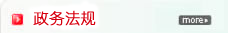
<style>
.page{position:relative;width:228px;height:33px}
.page>*{position:absolute;margin:0}
.t1{font:15.3px "YouYuan";color:#d7000f;font-weight:bold}
</style>
<div class="page">
<p class="t1" style="left:33px;top:10px;width:63px;height:16px">政务法规</p>
</div>
